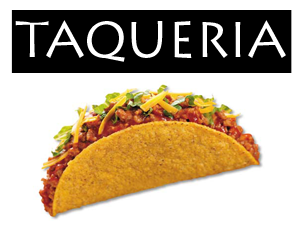
<style>
.page{position:relative;width:302px;height:240px;background:#ffffff}
.page>*{position:absolute;margin:0}
.t1{font:50px "LithosPro-Regular";letter-spacing:-0.015em;color:#ffffff}
</style>
<div class="page">
<p class="t1" style="left:15px;top:20px;width:271px;height:42px">TAQUERIA</p>
</div>
